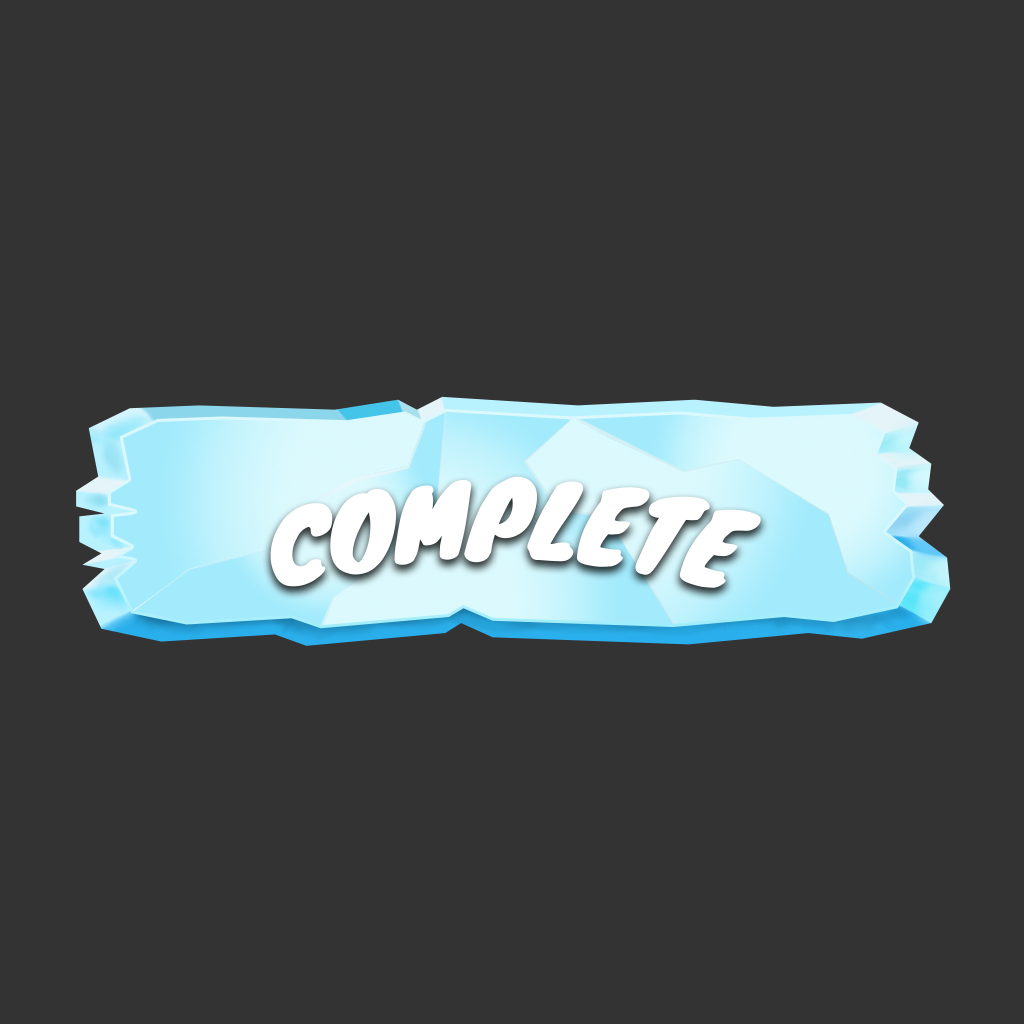
<style>
.page{position:relative;width:1024px;height:1024px;background:#333333}
.page>*{position:absolute;margin:0}
.t1{font:95.9px "Knewave-Regular";color:#ffffff}
</style>
<div class="page">
<p class="t1" style="left:270px;top:476px;width:491px;height:112px">COMPLETE</p>
</div>
